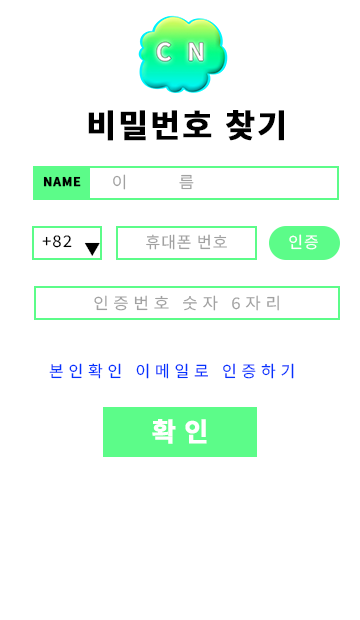
<style>
.page{position:relative;width:360px;height:620px;background:#ffffff}
.page>*{position:absolute;margin:0}
.t1{font:32px "NotoSansKR-Bold";letter-spacing:0.06em;color:#000000;font-weight:bold}
.t2{font:16px "NotoSansKR-Regular";letter-spacing:3.06em;color:#a1a1a1;scale:1.05 1}
.t3{font:12px "NotoSansKR-Bold";letter-spacing:0.06em;color:#000000;text-transform:uppercase;font-weight:bold}
.t4{font:16px "NotoSansKR-Regular";letter-spacing:0.06em;color:#000000;scale:1.05 1}
.t5{font:16px "NotoSansKR-Regular";letter-spacing:0.06em;color:#000000}
.t6{font:16px "NotoSansKR-Regular";letter-spacing:0.06em;color:#a1a1a1}
.t7{font:16px "NotoSansKR-Regular";letter-spacing:0.06em;color:#ffffff}
.t8{font:16px "NotoSansKR-Regular";letter-spacing:0.28em;color:#a1a1a1;scale:1.05 1}
.t9{font:16px "NotoSansKR-Regular";letter-spacing:0.3em;color:#0332fe}
.t10{font:26px "NotoSansKR-Bold";letter-spacing:0.3em;color:#ffffff;font-weight:bold}
</style>
<div class="page">
<p class="t1" style="left:88px;top:110px;width:196px;height:31px">비밀번호 찾기</p>
<p class="t2" style="left:113px;top:174px;width:81px;height:16px">이름</p>
<p class="t3" style="left:43px;top:176px;width:38px;height:11px">name</p>
<p class="t4" style="left:42px;top:235px;width:30px;height:13px">+82</p>
<p class="t5" style="left:84px;top:242px;width:16px;height:14px">▼</p>
<p class="t6" style="left:146px;top:234px;width:81px;height:16px">휴대폰 번호</p>
<p class="t7" style="left:289px;top:234px;width:29px;height:16px">인증</p>
<p class="t8" style="left:94px;top:295px;width:185px;height:16px">인증번호 숫자 6자리</p>
<p class="t9" style="left:49px;top:363px;width:245px;height:16px">본인확인 이메일로 인증하기</p>
<p class="t10" style="left:152px;top:419px;width:55px;height:25px">확인</p>
</div>
